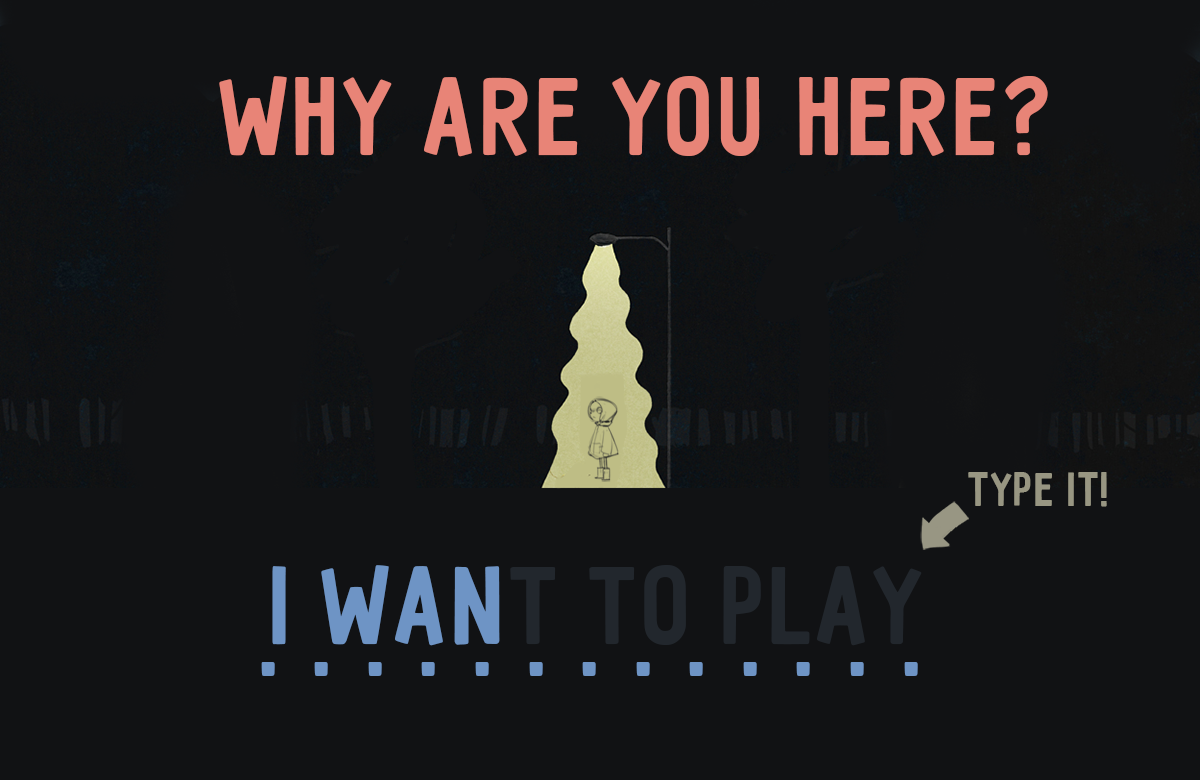
<style>
.page{position:relative;width:1200px;height:780px;background:#111214}
.page>*{position:absolute;margin:0}
.t1{font:123px "Pribambas";color:#e88477}
.t2{font:52.8px "Pribambas";color:#989682}
.t3{font:123px "Pribambas";color:#22272d}
.t4{font:123px "Pribambas";color:#6e94c5}
.t5{font:123px "Pribambas";letter-spacing:0.28em;color:#6e94c5}
.t6{font:123px "Gagalin-Regular";letter-spacing:0.28em;color:#6e94c5}
</style>
<div class="page">
<p class="t1" style="left:219px;top:76px;width:829px;height:81px">WHY ARE YOU HERE?</p>
<p class="t2" style="left:968px;top:472px;width:139px;height:35px">TYPE IT!</p>
<p class="t3" style="left:272px;top:565px;width:650px;height:81px"><span class="t4">I WAN</span>T TO PLAY</p>
<p class="t5" style="left:261px;top:662px;width:657px;height:14px">...............<span class="t6">..............</span></p>
</div>
